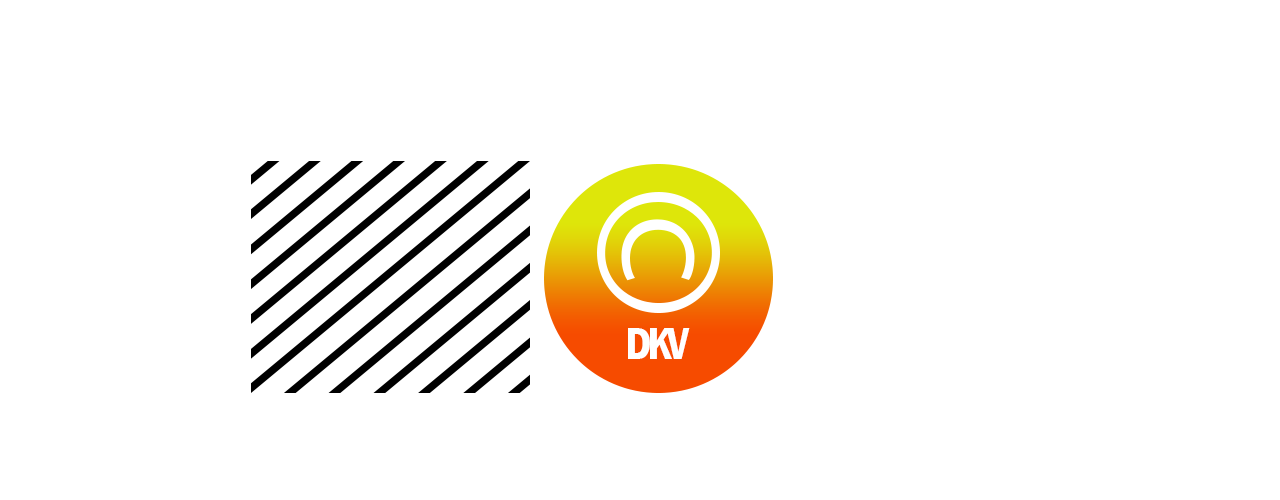
<style>
.page{position:relative;width:1280px;height:500px;background:#ffffff}
.page>*{position:absolute;margin:0}
.t1{font:46.9px "FranklinGothic-DemiCond";letter-spacing:-0.1em;color:#ffffff}
</style>
<div class="page">
<p class="t1" style="left:628px;top:328px;width:62px;height:31px">DKV</p>
</div>
